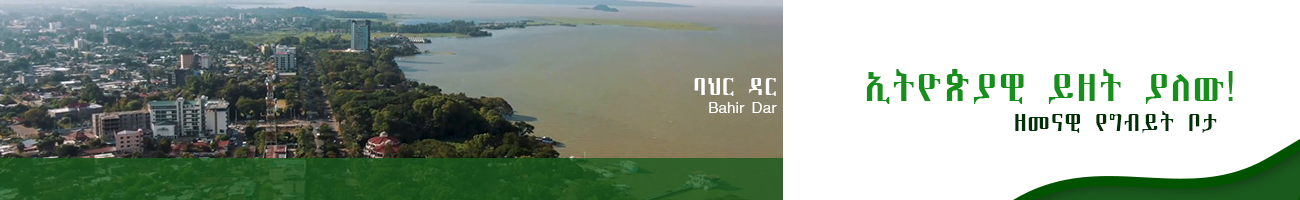
<style>
.page{position:relative;width:1300px;height:200px;background:#ffffff}
.page>*{position:absolute;margin:0}
.t1{font:15px "PowerGeezUnicode2";color:#ffffff}
.t2{font:25px "PowerGeezUnicode2";color:#ffffff}
.t3{font:40px "PowerGeezUnicode2";color:#15901b}
.t4{font:25px "PowerGeezUnicode2";color:#003105}
</style>
<div class="page">
<p class="t1" style="left:694px;top:78px;width:83px;height:35px"><span class="t2">ባህር ዳር<br></span>  Bahir Dar</p>
<p class="t3" style="left:866px;top:69px;width:367px;height:64px">ኢትዮጵያዊ ይዘት ያለው!<br>            <span class="t4">ዘመናዊ የግብይት ቦታ</span></p>
</div>
